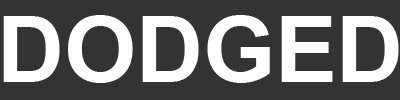
<style>
.page{position:relative;width:400px;height:100px;background:#333333}
.page>*{position:absolute;margin:0}
.t1{font:92.4px "Arial-BoldMT";color:#ffffff}
</style>
<div class="page">
<p class="t1" style="left:3px;top:15px;width:396px;height:68px">DODGED</p>
</div>
